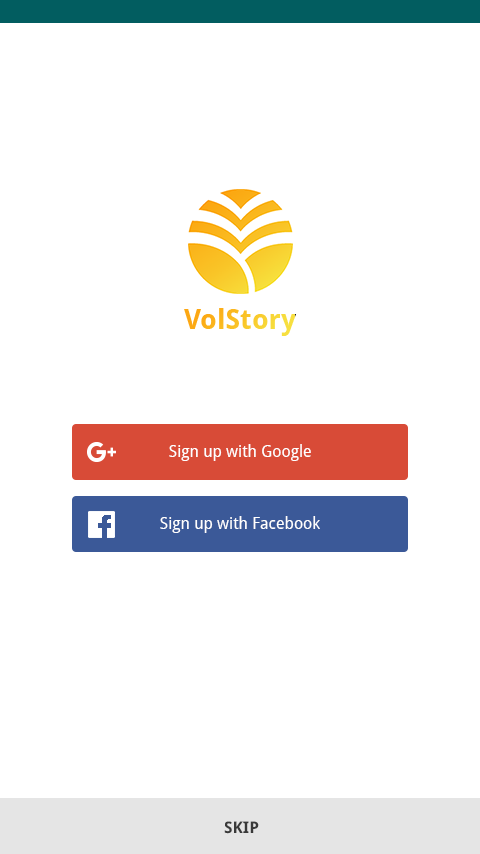
<style>
.page{position:relative;width:480px;height:854px;background:#ffffff}
.page>*{position:absolute;margin:0}
.t1{font:16px "DroidSans";color:#ffffff}
.t2{font:16px "DroidSans-Bold";color:#393939}
</style>
<div class="page">
<p class="t1" style="left:169px;top:444px;width:142px;height:17px">Sign up with Google</p>
<p class="t1" style="left:160px;top:516px;width:160px;height:17px">Sign up with Facebook</p>
<p class="t2" style="left:224px;top:821px;width:35px;height:13px">SKIP</p>
</div>
